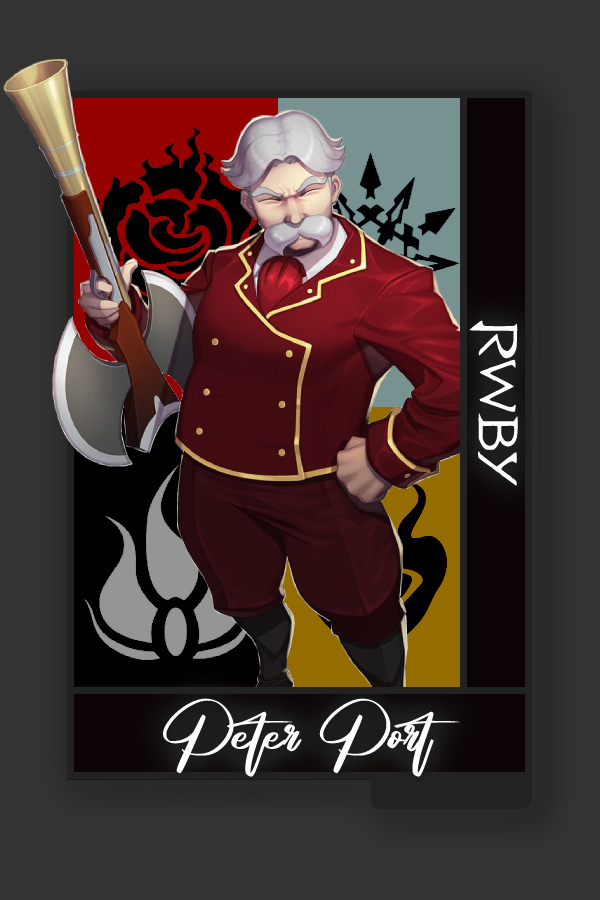
<style>
.page{position:relative;width:600px;height:900px;background:#333333}
.page>*{position:absolute;margin:0}
.t1{font:61.3px "RWBY_Style";color:#ffffff;scale:1.25 1}
.t2{font:76.6px "RosegaFREE";color:#ffffff;scale:0.91 1}
</style>
<div class="page">
<p class="t1" style="left:469px;top:320px;width:49px;height:166px;rotate:90deg">RWBY</p>
<p class="t2" style="left:161px;top:698px;width:300px;height:80px">Peter Port</p>
</div>
